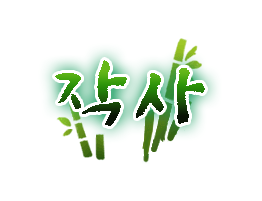
<style>
.page{position:relative;width:262px;height:201px;background:#ffffff}
.page>*{position:absolute;margin:0}
.t1{font:85.3px "SangSangRockOTF";letter-spacing:0.08em}
.t2{font:77.9px "SangSangRockOTF";letter-spacing:0.08em}
</style>
<div class="page">
<p class="t1" style="left:55px;top:60px;width:150px;height:66px">작<span class="t2">사</span></p>
</div>
